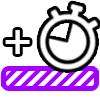
<style>
.page{position:relative;width:100px;height:100px;background:#ffffff}
.page>*{position:absolute;margin:0}
.t1{font:12px "ArialMT";color:#ffffff}
</style>
<div class="page">
<p class="t1" style="left:5px;top:30px;width:25px;height:24px;text-align:center">+</p>
</div>
